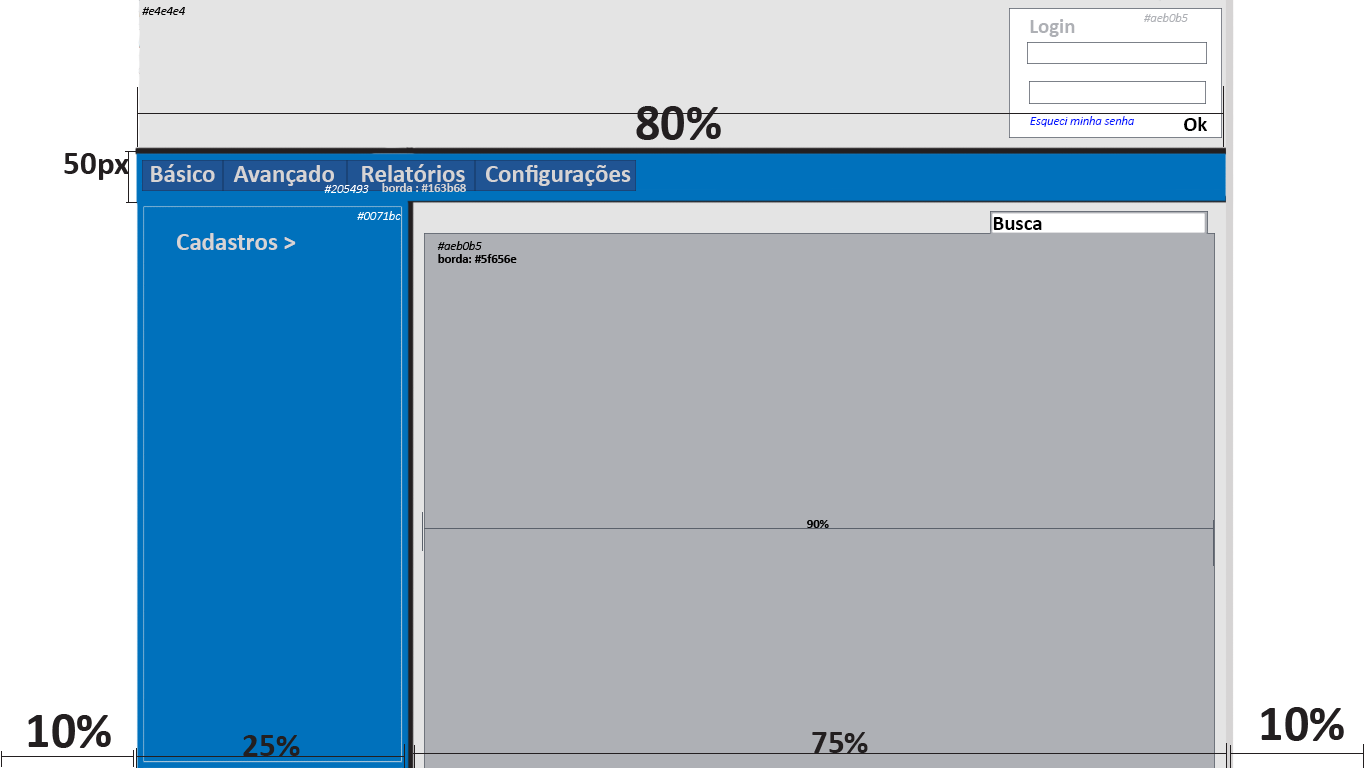
<style>
.page{position:relative;width:1366px;height:768px;background:#aeb0b5}
.page>*{position:absolute;margin:0}
.t1{font:20.8px "Calibri-Bold";color:#aeb0b5}
.t2{font:12.5px "Calibri-LightItalic";color:#0018fe}
.t3{font:20.8px "Calibri-Bold";color:#000000}
.t4{font:25px "Calibri-Bold";color:#d6d4d4}
</style>
<div class="page">
<p class="t1" style="left:1030px;top:19px;width:45px;height:18px">Login</p>
<p class="t2" style="left:1030px;top:116px;width:104px;height:11px">Esqueci minha senha</p>
<p class="t3" style="left:1184px;top:117px;width:23px;height:14px">Ok</p>
<p class="t4" style="left:151px;top:164px;width:64px;height:18px">Básico</p>
<p class="t4" style="left:233px;top:165px;width:101px;height:21px">Avançado</p>
<p class="t4" style="left:362px;top:164px;width:103px;height:18px">Relatórios</p>
<p class="t4" style="left:486px;top:165px;width:145px;height:21px">Configurações</p>
<p class="t3" style="left:993px;top:217px;width:49px;height:13px">Busca</p>
<p class="t4" style="left:177px;top:233px;width:119px;height:17px">Cadastros &gt;</p>
</div>
